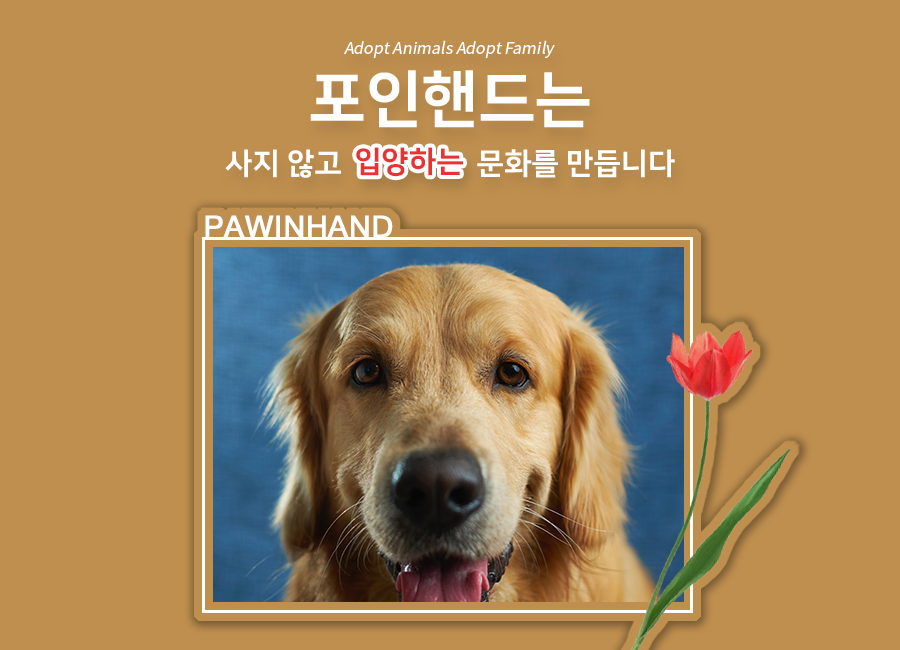
<style>
.page{position:relative;width:900px;height:650px;background:#bf8f4f}
.page>*{position:absolute;margin:0}
.t1{font:16px "NotoSansKR-Regular";color:#ffffff;font-style:italic}
.t2{font:62px "NanumSquareEB";color:#ffffff}
.t3{font:30px "NanumSquareEB";color:#ffffff}
.t4{font:30px "NanumSquareEB";color:#e73333}
.t5{font:30px "MicrosoftSansSerif";color:#ffffff;font-weight:bold}
</style>
<div class="page">
<p class="t1" style="left:344px;top:40px;width:211px;height:18px">Adopt Animals Adopt Family</p>
<p class="t2" style="left:310px;top:70px;width:280px;height:58px">포인핸드는</p>
<p class="t3" style="left:225px;top:149px;width:450px;height:29px">사지 않고                  문화를 만듭니다</p>
<p class="t4" style="left:356px;top:147px;width:107px;height:30px">입양하는</p>
<p class="t5" style="left:205px;top:215px;width:188px;height:23px">PAWINHAND</p>
</div>
